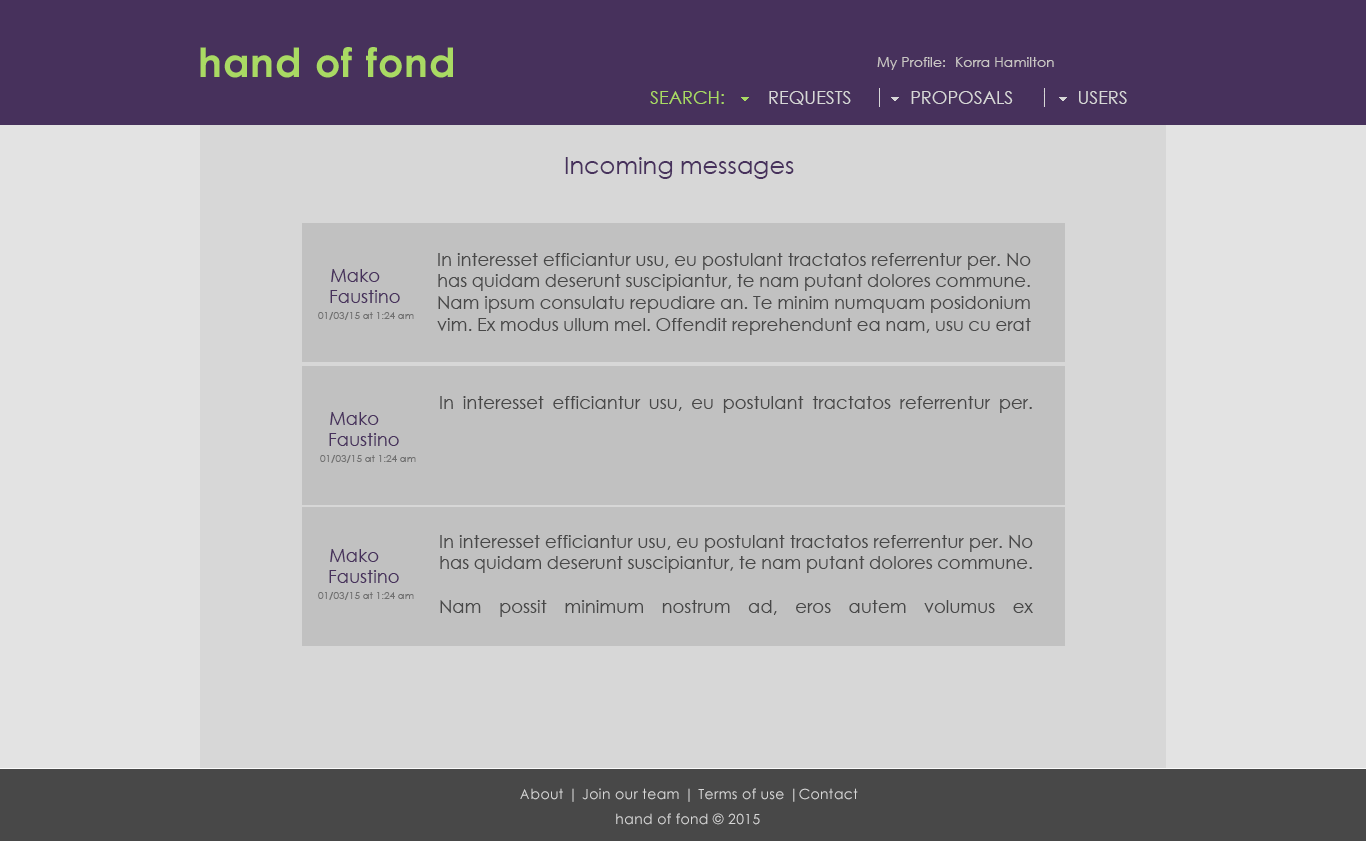
<style>
.page{position:relative;width:1366px;height:841px;background:#d7d7d7}
.page>*{position:absolute;margin:0}
.t1{font:14px "CenturyGothic";color:#c9c5c4}
.t2{font:18px "CenturyGothic";color:#a9da63}
.t3{font:18px "CenturyGothic";color:#d7d7d7}
.t4{font:24px "CenturyGothic";color:#47315c}
.t5{font:18px "CenturyGothic";color:#484848}
.t6{font:18px "CenturyGothic";color:#ffffff}
.t7{font:18px "CenturyGothic";color:#47315c}
.t8{font:10px "CenturyGothic";color:#666666}
.t9{font:14px "CenturyGothic";letter-spacing:0.025em;color:#d7d7d7}
</style>
<div class="page">
<p class="t1" style="left:877px;top:57px;width:68px;height:13px">My Profile:</p>
<p class="t1" style="left:956px;top:57px;width:98px;height:10px">Korra Hamilton</p>
<p class="t2" style="left:650px;top:91px;width:74px;height:13px">SEARCH:</p>
<p class="t3" style="left:769px;top:91px;width:82px;height:14px">REQUESTS</p>
<p class="t3" style="left:911px;top:91px;width:102px;height:13px">PROPOSALS</p>
<p class="t3" style="left:1079px;top:91px;width:48px;height:13px">USERS</p>
<p class="t4" style="left:565px;top:157px;width:229px;height:22px">Incoming messages</p>
<p class="t5" style="left:437px;top:253px;width:594px;height:82px;text-align:justify">In interesset efficiantur usu, eu postulant tractatos referrentur per. No has quidam deserunt suscipiantur, te nam putant dolores commune. Nam ipsum consulatu repudiare an. Te minim numquam posidonium vim. Ex modus ullum mel. Offendit reprehendunt ea nam, usu cu erat<span class="t6"> justo.</span></p>
<p class="t7" style="left:331px;top:269px;width:49px;height:13px">Mako</p>
<p class="t7" style="left:330px;top:290px;width:70px;height:13px">Faustino</p>
<p class="t8" style="left:318px;top:312px;width:96px;height:8px;opacity:0.9">01/03/15 at 1:24 am</p>
<p class="t5" style="left:440px;top:396px;width:592px;height:17px">In interesset efficiantur usu, eu postulant tractatos referrentur per.</p>
<p class="t7" style="left:330px;top:412px;width:49px;height:13px">Mako</p>
<p class="t7" style="left:329px;top:433px;width:70px;height:13px">Faustino</p>
<p class="t8" style="left:320px;top:455px;width:96px;height:8px;opacity:0.9">01/03/15 at 1:24 am</p>
<p class="t5" style="left:440px;top:535px;width:593px;height:82px;text-align:justify">In interesset efficiantur usu, eu postulant tractatos referrentur per. No has quidam deserunt suscipiantur, te nam putant dolores commune.  <br><br>Nam possit minimum nostrum ad, eros autem volumus ex</p>
<p class="t7" style="left:330px;top:549px;width:49px;height:13px">Mako</p>
<p class="t7" style="left:329px;top:570px;width:70px;height:13px">Faustino</p>
<p class="t8" style="left:318px;top:592px;width:96px;height:8px;opacity:0.9">01/03/15 at 1:24 am</p>
<p class="t9" style="left:520px;top:788px;width:338px;height:14px">About | Join our team | Terms of use |Contact</p>
<p class="t9" style="left:616px;top:813px;width:144px;height:12px">hand of fond © 2015</p>
</div>
